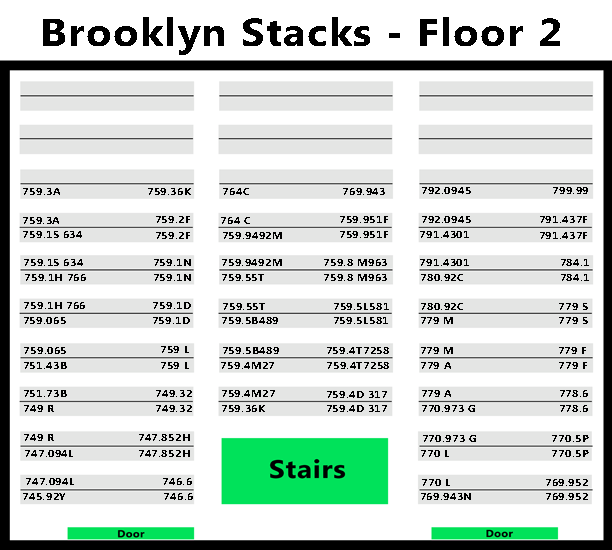
<style>
.page{position:relative;width:612px;height:550px;background:#ffffff}
.page>*{position:absolute;margin:0}
.t1{font:38.5px "Ebrima-Bold";letter-spacing:0.025em;color:#000000;scale:1.1 1}
.t2{font:10.2px "Ebrima-Bold";letter-spacing:0.025em;color:#000000;scale:1.1 1}
</style>
<div class="page">
<p class="t1" style="left:43px;top:17px;width:517px;height:38px">Brooklyn Stacks - Floor 2</p>
<p class="t2" style="left:23px;top:188px;width:37px;height:7px">759.3A</p>
<p class="t2" style="left:148px;top:188px;width:43px;height:7px">759.36K</p>
<p class="t2" style="left:223px;top:188px;width:26px;height:7px">764C</p>
<p class="t2" style="left:343px;top:188px;width:42px;height:7px">769.943N</p>
<p class="t2" style="left:422px;top:187px;width:49px;height:7px">792.09458</p>
<p class="t2" style="left:553px;top:187px;width:35px;height:7px">799.99</p>
<p class="t2" style="left:23px;top:217px;width:36px;height:7px">759.3A</p>
<p class="t2" style="left:156px;top:216px;width:34px;height:7px">759.2F</p>
<p class="t2" style="left:221px;top:217px;width:29px;height:7px">764 C</p>
<p class="t2" style="left:340px;top:216px;width:48px;height:7px">759.951F</p>
<p class="t2" style="left:422px;top:216px;width:49px;height:7px">792.0945</p>
<p class="t2" style="left:540px;top:216px;width:47px;height:7px">791.437F</p>
<p class="t2" style="left:23px;top:231px;width:59px;height:7px">759.1S 634</p>
<p class="t2" style="left:156px;top:232px;width:34px;height:7px">759.2F</p>
<p class="t2" style="left:223px;top:232px;width:59px;height:7px">759.9492M</p>
<p class="t2" style="left:340px;top:231px;width:48px;height:7px">759.951F</p>
<p class="t2" style="left:420px;top:231px;width:49px;height:7px">791.4301</p>
<p class="t2" style="left:540px;top:232px;width:47px;height:7px">791.437F</p>
<p class="t2" style="left:24px;top:259px;width:59px;height:7px">759.1S 634</p>
<p class="t2" style="left:154px;top:259px;width:37px;height:7px">759.1N</p>
<p class="t2" style="left:222px;top:259px;width:60px;height:7px">759.9492M</p>
<p class="t2" style="left:324px;top:259px;width:63px;height:7px">759.8 M963</p>
<p class="t2" style="left:420px;top:259px;width:49px;height:7px">791.4301</p>
<p class="t2" style="left:561px;top:259px;width:28px;height:7px">784.1</p>
<p class="t2" style="left:25px;top:274px;width:61px;height:7px">759.1H 766</p>
<p class="t2" style="left:154px;top:274px;width:37px;height:7px">759.1N</p>
<p class="t2" style="left:222px;top:274px;width:42px;height:7px">759.55T</p>
<p class="t2" style="left:324px;top:274px;width:63px;height:7px">759.8 M963</p>
<p class="t2" style="left:421px;top:274px;width:42px;height:7px">780.92C</p>
<p class="t2" style="left:561px;top:274px;width:28px;height:7px">784.1</p>
<p class="t2" style="left:24px;top:302px;width:61px;height:7px">759.1H 766</p>
<p class="t2" style="left:153px;top:302px;width:38px;height:7px">759.1D</p>
<p class="t2" style="left:223px;top:303px;width:42px;height:7px">759.55T</p>
<p class="t2" style="left:334px;top:303px;width:55px;height:7px">759.5L581</p>
<p class="t2" style="left:421px;top:303px;width:42px;height:7px">780.92C</p>
<p class="t2" style="left:559px;top:303px;width:29px;height:7px">779 S</p>
<p class="t2" style="left:24px;top:317px;width:42px;height:7px">759.065</p>
<p class="t2" style="left:153px;top:317px;width:37px;height:7px">759.1D</p>
<p class="t2" style="left:222px;top:317px;width:56px;height:7px">759.5B489</p>
<p class="t2" style="left:334px;top:317px;width:54px;height:7px">759.5L581</p>
<p class="t2" style="left:421px;top:317px;width:32px;height:7px">779 M</p>
<p class="t2" style="left:559px;top:317px;width:29px;height:7px">779 S</p>
<p class="t2" style="left:24px;top:347px;width:42px;height:7px">759.065</p>
<p class="t2" style="left:161px;top:346px;width:28px;height:7px">759 L</p>
<p class="t2" style="left:223px;top:347px;width:56px;height:7px">759.5B489</p>
<p class="t2" style="left:327px;top:347px;width:62px;height:7px">759.4T7258</p>
<p class="t2" style="left:421px;top:347px;width:32px;height:7px">779 M</p>
<p class="t2" style="left:559px;top:347px;width:27px;height:7px">779 F</p>
<p class="t2" style="left:24px;top:362px;width:43px;height:7px">751.43B</p>
<p class="t2" style="left:161px;top:362px;width:28px;height:7px">759 L</p>
<p class="t2" style="left:221px;top:362px;width:53px;height:7px">759.4M27</p>
<p class="t2" style="left:327px;top:362px;width:62px;height:7px">759.4T7258</p>
<p class="t2" style="left:421px;top:362px;width:30px;height:7px">779 A</p>
<p class="t2" style="left:559px;top:362px;width:28px;height:7px">779 F</p>
<p class="t2" style="left:24px;top:390px;width:43px;height:7px">751.73B</p>
<p class="t2" style="left:156px;top:390px;width:36px;height:7px">749.32</p>
<p class="t2" style="left:222px;top:390px;width:53px;height:7px">759.4M27</p>
<p class="t2" style="left:422px;top:390px;width:29px;height:7px">779 A</p>
<p class="t2" style="left:560px;top:390px;width:28px;height:7px">778.6</p>
<p class="t2" style="left:327px;top:391px;width:60px;height:7px">759.4D 317</p>
<p class="t2" style="left:24px;top:405px;width:30px;height:7px">749 R</p>
<p class="t2" style="left:156px;top:405px;width:36px;height:7px">749.32</p>
<p class="t2" style="left:222px;top:405px;width:43px;height:7px">759.36K</p>
<p class="t2" style="left:327px;top:405px;width:60px;height:7px">759.4D 317</p>
<p class="t2" style="left:422px;top:405px;width:53px;height:7px">770.973 G</p>
<p class="t2" style="left:560px;top:405px;width:28px;height:7px">778.6</p>
<p class="t2" style="left:24px;top:434px;width:30px;height:7px">749 R</p>
<p class="t2" style="left:139px;top:434px;width:51px;height:7px">747.852H</p>
<p class="t2" style="left:423px;top:435px;width:53px;height:7px">770.973 G</p>
<p class="t2" style="left:552px;top:435px;width:37px;height:7px">770.5P</p>
<p class="t2" style="left:25px;top:450px;width:48px;height:7px">747.094L</p>
<p class="t2" style="left:139px;top:450px;width:51px;height:7px">747.852H</p>
<p class="t2" style="left:421px;top:450px;width:28px;height:7px">770 L</p>
<p class="t2" style="left:552px;top:450px;width:37px;height:7px">770.5P</p>
<p class="t2" style="left:26px;top:478px;width:48px;height:7px">747.094L</p>
<p class="t2" style="left:163px;top:478px;width:29px;height:7px">746.6</p>
<p class="t2" style="left:422px;top:479px;width:28px;height:7px">770 L</p>
<p class="t2" style="left:546px;top:479px;width:42px;height:7px">769.952</p>
<p class="t2" style="left:23px;top:493px;width:42px;height:7px">745.92Y</p>
<p class="t2" style="left:164px;top:493px;width:29px;height:7px">746.6</p>
<p class="t2" style="left:421px;top:493px;width:50px;height:7px">769.943Nn</p>
<p class="t2" style="left:546px;top:493px;width:42px;height:7px">769.952</p>
</div>
